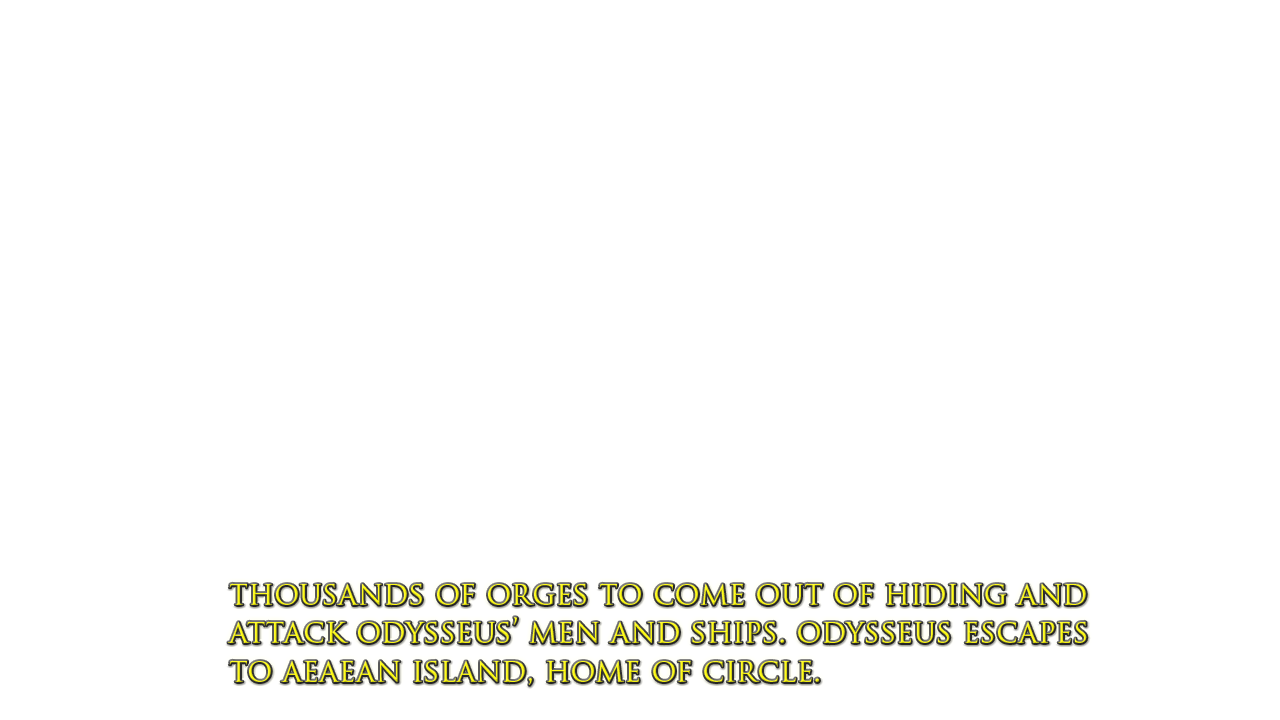
<style>
.page{position:relative;width:1280px;height:720px;background:#ffffff}
.page>*{position:absolute;margin:0}
.t1{font:31.8px "TrajanPro-Regular";color:#fffc14}
</style>
<div class="page">
<p class="t1" style="left:228px;top:583px;width:859px;height:102px">thousands of orges to come out of hiding and<br>attack odysseus’ men and ships. odysseus escapes<br>to aeaean island, home of circle.</p>
</div>
